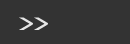
<style>
.page{position:relative;width:130px;height:44px;background:#333333}
.page>*{position:absolute;margin:0}
.t1{font:30px "-@-D-RCW2550v.2.00-";color:#e6e6e6}
</style>
<div class="page">
<p class="t1" style="left:19px;top:17px;width:29px;height:13px">&gt;&gt;</p>
</div>
